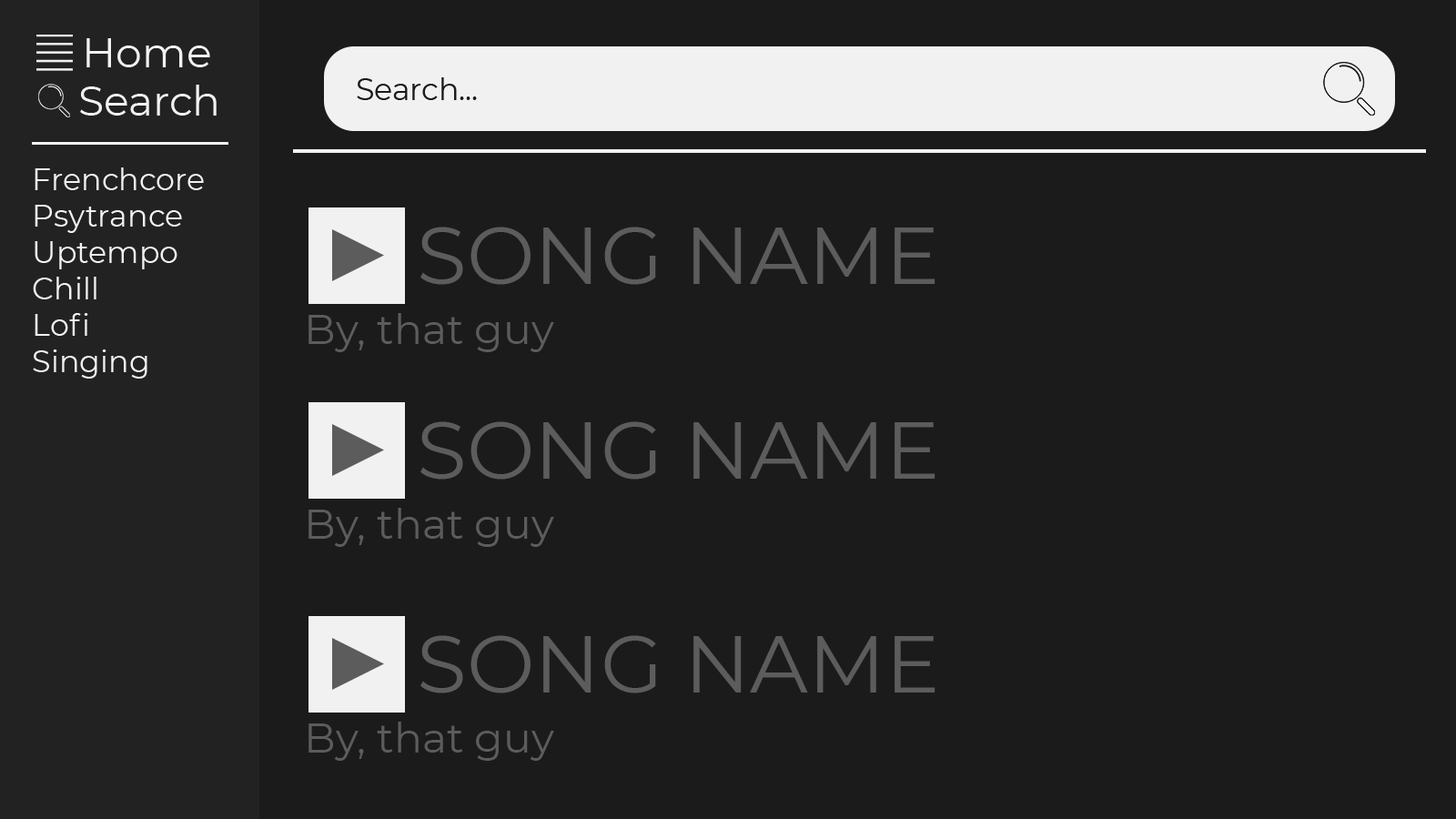
<style>
.page{position:relative;width:1456px;height:819px;background:#1b1b1b}
.page>*{position:absolute;margin:0}
.t1{font:41.7px "Montserrat-Regular";color:#f1f1f1}
.t2{font:30.3px "Montserrat-Regular";color:#1a1a1a}
.t3{font:30.3px "Montserrat-Regular";color:#f1f1f1}
.t4{font:80.9px "Montserrat-Regular";color:#5c5c5c}
.t5{font:41.7px "Montserrat-Regular";color:#5c5c5c}
</style>
<div class="page">
<p class="t1" style="left:86px;top:38px;width:124px;height:29px">Home</p>
<p class="t2" style="left:357px;top:77px;width:120px;height:23px">Search...</p>
<p class="t1" style="left:80px;top:85px;width:137px;height:31px">Search</p>
<p class="t3" style="left:33px;top:167px;width:171px;height:212px">Frenchcore<br>Psytrance<br>Uptempo<br>Chill<br>Lofi<br>Singing</p>
<p class="t4" style="left:420px;top:227px;width:515px;height:58px">SONG NAME</p>
<p class="t5" style="left:308px;top:313px;width:246px;height:39px">By, that guy</p>
<p class="t4" style="left:420px;top:421px;width:515px;height:59px">SONG NAME</p>
<p class="t5" style="left:308px;top:508px;width:246px;height:39px">By, that guy</p>
<p class="t4" style="left:420px;top:635px;width:515px;height:58px">SONG NAME</p>
<p class="t5" style="left:308px;top:722px;width:246px;height:39px">By, that guy</p>
</div>
